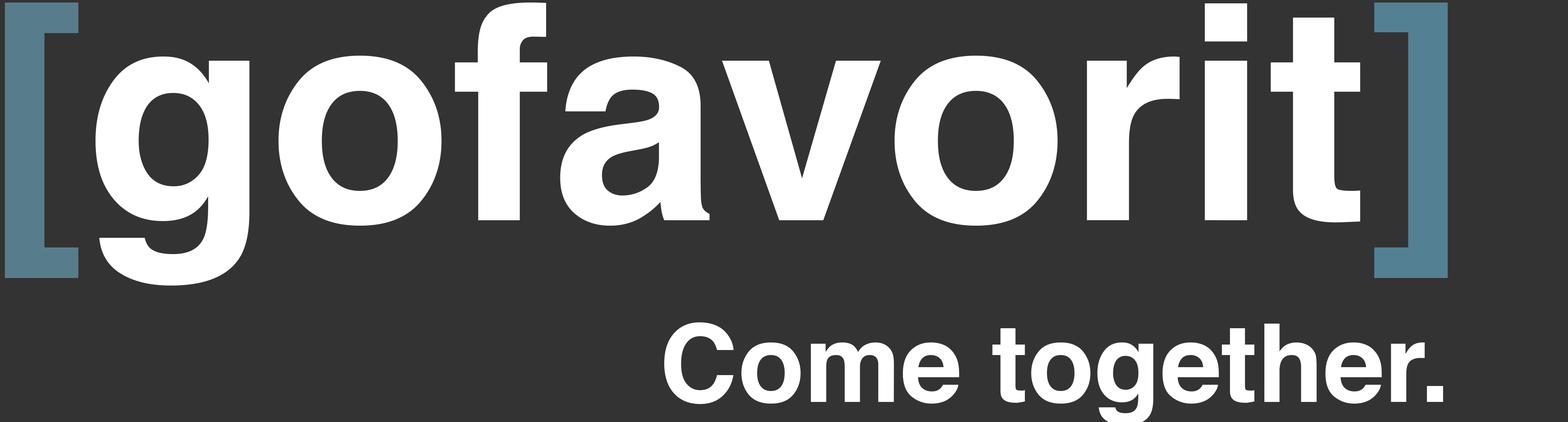
<style>
.page{position:relative;width:1568px;height:422px;background:#333333}
.page>*{position:absolute;margin:0}
.t1{font:299.5px "Helvetica-Bold";color:#ffffff}
.t2{font:299.5px "Helvetica-Bold";color:#577d8d}
.t3{font:299.5px "Helvetica-Bold";color:#548093}
</style>
<div class="page">
<p class="t1" style="left:5px;top:3px;width:1443px;height:283px"><span class="t2">[</span>gofavorit<span class="t3">]</span></p>
</div>
